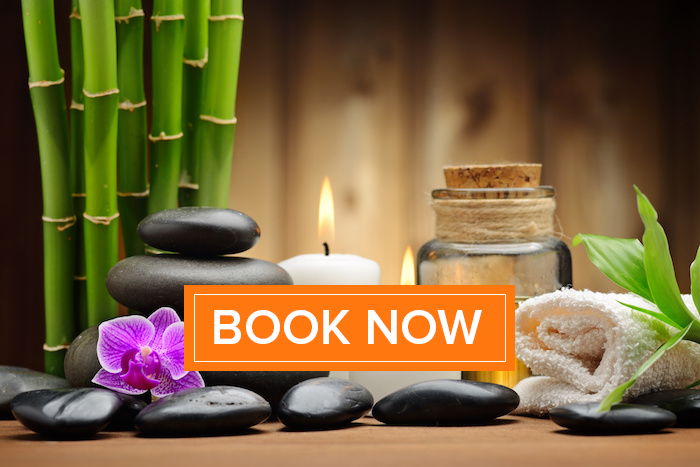
<style>
.page{position:relative;width:700px;height:467px}
.page>*{position:absolute;margin:0}
.t1{font:12px "ProximaNova-Semibold";color:#ffffff}
</style>
<div class="page">
<p class="t1" style="left:214px;top:310px;width:268px;height:34px">BOOK NOW</p>
</div>
